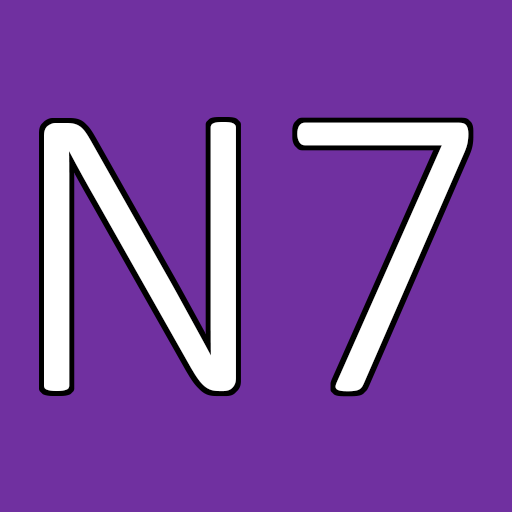
<style>
.page{position:relative;width:512px;height:512px;background:#7030a0}
.page>*{position:absolute;margin:0}
.t1{font:423.3px "Calibri-Light";color:#ffffff}
</style>
<div class="page">
<p class="t1" style="left:44px;top:122px;width:425px;height:270px">N7</p>
</div>
